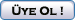
<style>
.page{position:relative;width:75px;height:20px}
.page>*{position:absolute;margin:0}
.t1{font:12px "CopperplateGothic-Bold";color:#070802}
</style>
<div class="page">
<p class="t1" style="left:12px;top:4px;width:52px;height:12px">Üye Ol !</p>
</div>
